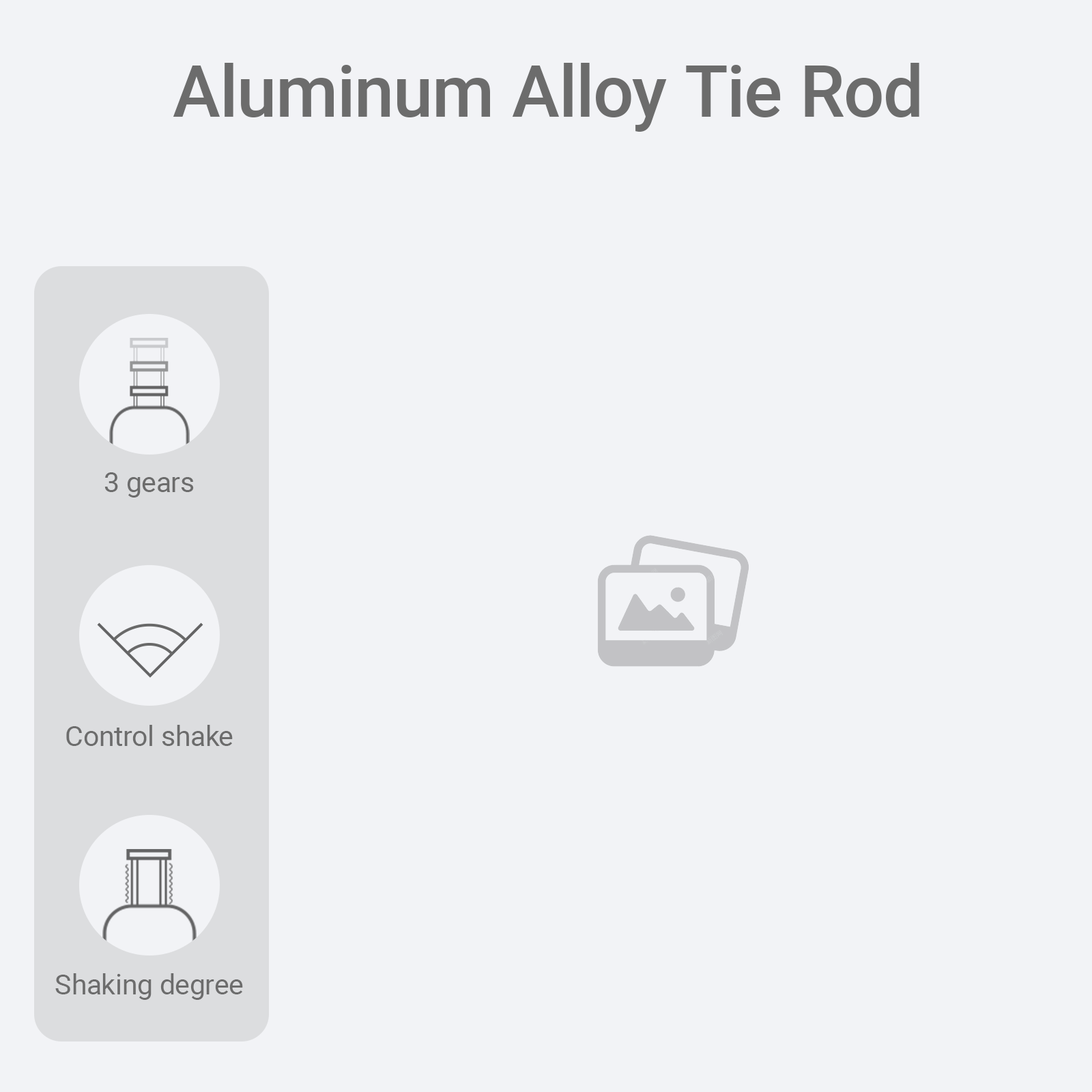
<style>
.page{position:relative;width:1092px;height:1092px;background:#f2f3f6}
.page>*{position:absolute;margin:0}
.t1{font:71.3px "Roboto-Medium";color:#6c6c6c}
.t2{font:27.7px "Roboto-Regular";color:#6c6c6c}
</style>
<div class="page">
<p class="t1" style="left:173px;top:63px;width:746px;height:69px">Aluminum Alloy Tie Rod</p>
<p class="t2" style="left:104px;top:472px;width:90px;height:26px">3 gears</p>
<p class="t2" style="left:66px;top:725px;width:167px;height:21px">Control shake</p>
<p class="t2" style="left:55px;top:973px;width:188px;height:27px">Shaking degree</p>
</div>
